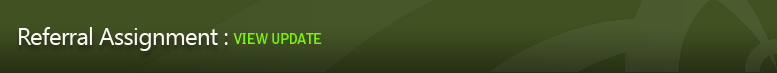
<style>
.page{position:relative;width:777px;height:73px;background:#415122}
.page>*{position:absolute;margin:0}
.t1{font:24px "SegoeUI";letter-spacing:-0.025em;color:#faf7f5}
.t2{font:14px "BellGothicStd-Bold";letter-spacing:-0.05em;color:#7af40e}
</style>
<div class="page">
<p class="t1" style="left:19px;top:27px;width:209px;height:24px">Referral Assignment :</p>
<p class="t2" style="left:233px;top:33px;width:89px;height:11px">VIEW UPDATE</p>
</div>
